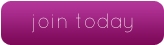
<style>
.page{position:relative;width:164px;height:45px}
.page>*{position:absolute;margin:0}
.t1{font:20.8px "QuicksandLight-Regular"}
</style>
<div class="page">
<p class="t1" style="left:32px;top:13px;width:101px;height:20px">join today</p>
</div>
